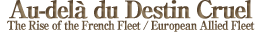
<style>
.page{position:relative;width:261px;height:34px;background:#ffffff}
.page>*{position:absolute;margin:0}
.t1{font:12px/22px "RyuminPro-ExBold";letter-spacing:-0.08em;color:#6f5b42;font-weight:bold;scale:0.9 1}
.t2{font:24px/22px "RyuminPro-ExBold";letter-spacing:-0.08em;color:#6f5b42;font-weight:bold}
</style>
<div class="page">
<p class="t1" style="left:7px;top:0px;width:248px;height:32px;text-align:center"><span class="t2">Au-delà du Destin Cruel<br></span>The Rise of the French Fleet / European Allied Fleet</p>
</div>
